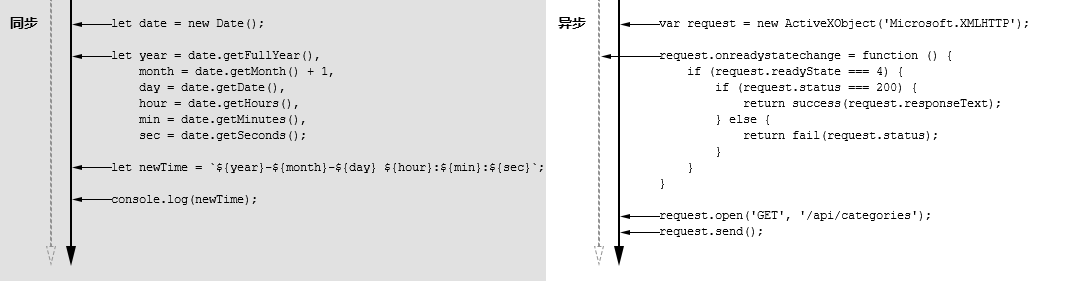
<style>
.page{position:relative;width:1092px;height:281px;background:#e1e1e1}
.page>*{position:absolute;margin:0}
.t1{font:14px "MicrosoftYaHei-Bold";color:#000000}
.t2{font:12px/16px "CourierNewPSMT";color:#000000}
</style>
<div class="page">
<p class="t1" style="left:10px;top:17px;width:28px;height:12px">同步</p>
<p class="t1" style="left:558px;top:17px;width:28px;height:12px">异步</p>
<p class="t2" style="left:112px;top:19px;width:431px;height:186px">let date = new Date();<br><br>let year = date.getFullYear(),<br>    month = date.getMonth() + 1,<br>    day = date.getDate(),<br>    hour = date.getHours(),<br>    min = date.getMinutes(),<br>    sec = date.getSeconds();<br><br>let newTime = `${year}-${month}-${day} ${hour}:${min}:${sec}`;<br><br>console.log(newTime);</p>
<p class="t2" style="left:659px;top:19px;width:369px;height:218px">var request = new ActiveXObject('Microsoft.XMLHTTP'); <br><br>request.onreadystatechange = function () { <br>    if (request.readyState === 4) { <br>        if (request.status === 200) {<br>            return success(request.responseText);<br>        } else {<br>            return fail(request.status);<br>        }<br>    }<br>}<br><br>request.open('GET', '/api/categories');<br>request.send();</p>
</div>
